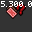
<style>
.page{position:relative;width:32px;height:32px;background:#333333}
.page>*{position:absolute;margin:0}
.t1{font:9px "Consolas";letter-spacing:-0.1em;color:#ffffff}
.t2{font:9px "Consolas";letter-spacing:0.1em;color:#ffffff}
.t3{font:9px "Consolas";letter-spacing:-0.038em;color:#ffffff}
</style>
<div class="page">
<p class="t1" style="left:1px;top:1px;width:31px;height:6px">5.<span class="t2">30</span>0.<span class="t3">0</span></p>
</div>
